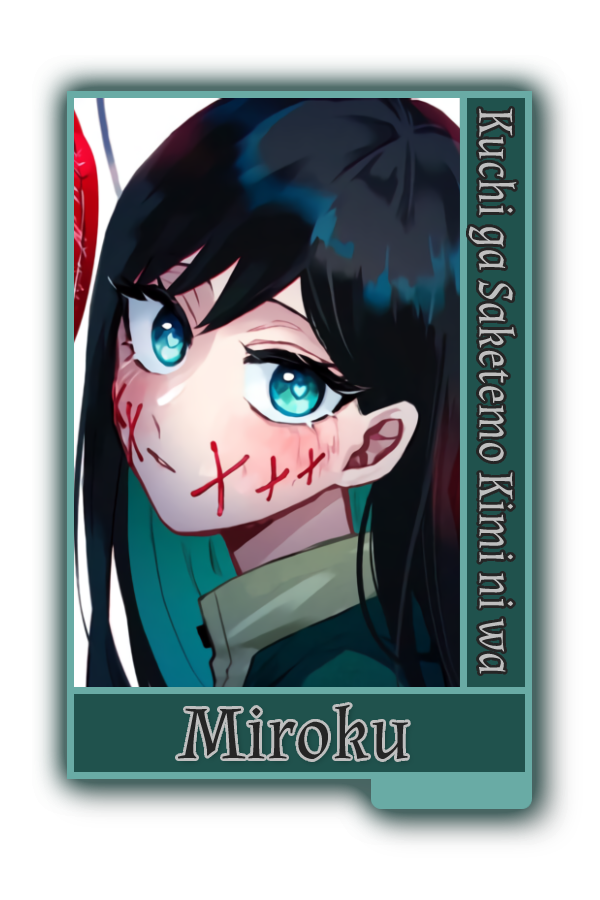
<style>
.page{position:relative;width:600px;height:900px;background:#ffffff}
.page>*{position:absolute;margin:0}
.t1{font:49.8px "Almendra-Regular";color:#bfbfbf;scale:0.92 1}
.t2{font:75px "Almendra-Regular";color:#252525}
</style>
<div class="page">
<p class="t1" style="left:468px;top:108px;width:49px;height:566px;rotate:90deg">Kuchi ga Saketemo Kimi ni wa</p>
<p class="t2" style="left:177px;top:704px;width:231px;height:56px">Miroku</p>
</div>
